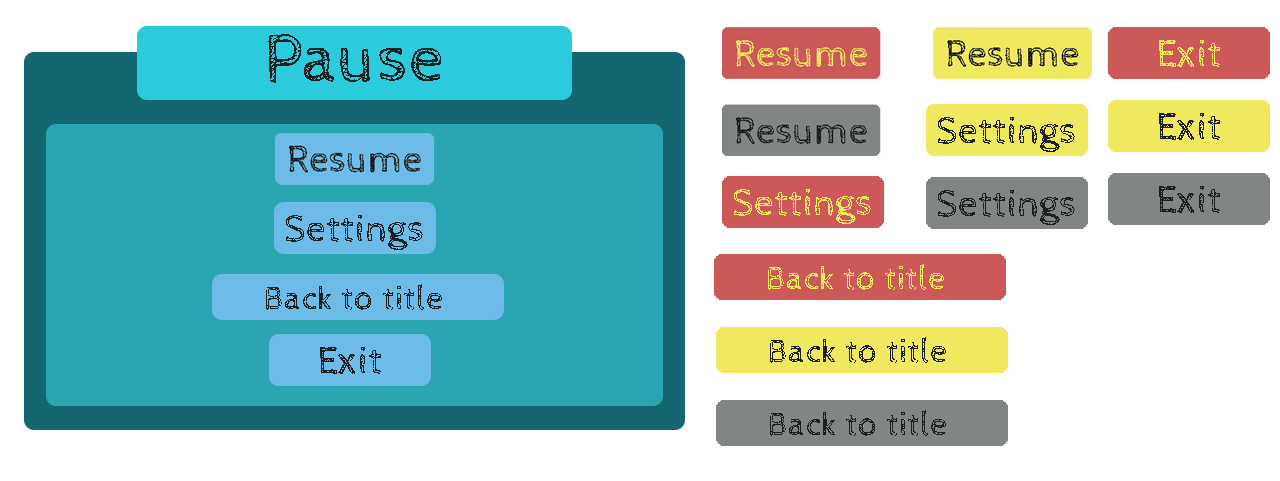
<style>
.page{position:relative;width:1280px;height:481px;background:#ffffff}
.page>*{position:absolute;margin:0}
.t1{font:39.3px "CabinSketch-Regular";color:#f0e85f}
.t2{font:39.3px "CabinSketch-Regular";color:#1c2020}
.t3{font:34.5px "CabinSketch-Regular";color:#f0e85f}
.t4{font:34.5px "CabinSketch-Regular";color:#1c2020}
</style>
<div class="page">
<p class="t1" style="left:1159px;top:40px;width:61px;height:27px">Exit</p>
<p class="t2" style="left:1159px;top:113px;width:61px;height:27px">Exit</p>
<p class="t2" style="left:938px;top:117px;width:137px;height:35px">Settings</p>
<p class="t1" style="left:734px;top:189px;width:137px;height:35px">Settings</p>
<p class="t2" style="left:1159px;top:186px;width:61px;height:27px">Exit</p>
<p class="t2" style="left:286px;top:215px;width:137px;height:35px">Settings</p>
<p class="t3" style="left:768px;top:264px;width:176px;height:26px">Back to title</p>
<p class="t4" style="left:266px;top:284px;width:176px;height:26px">Back to title</p>
<p class="t4" style="left:770px;top:337px;width:176px;height:26px">Back to title</p>
<p class="t2" style="left:320px;top:347px;width:61px;height:27px">Exit</p>
<p class="t4" style="left:770px;top:410px;width:176px;height:26px">Back to title</p>
</div>
